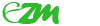
<style>
.page{position:relative;width:100px;height:26px;background:#ffffff}
.page>*{position:absolute;margin:0}
.t1{font:29.5px "Harrington";letter-spacing:-0.1em;color:#31b82d;scale:1.22 1}
.t2{font:29.5px "ForteMT";letter-spacing:-0.1em;color:#31b82d;scale:1.22 1}
.t3{font:35.4px "ForteMT";letter-spacing:-0.1em;color:#31b82d}
</style>
<div class="page">
<p class="t1" style="left:2px;top:2px;width:24px;height:21px">E</p>
<p class="t2" style="left:18px;top:3px;width:21px;height:21px">Z</p>
<p class="t3" style="left:32px;top:4px;width:27px;height:20px">m</p>
</div>
